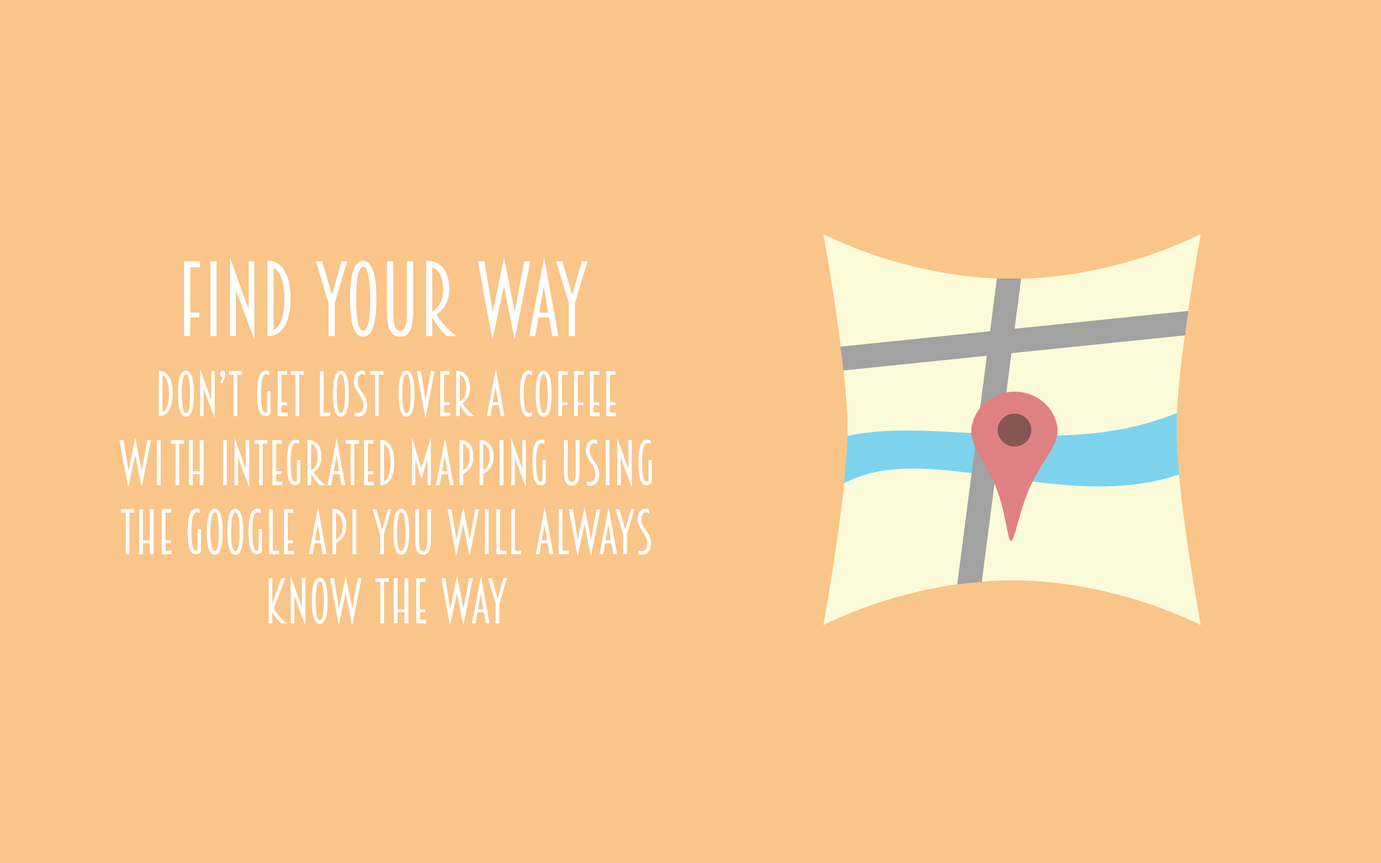
<style>
.page{position:relative;width:1381px;height:863px;background:#f9c588}
.page>*{position:absolute;margin:0}
.t1{font:95.9px "Breamcatcher-Regular";color:#ffffff}
.t2{font:57.6px "Breamcatcher-Regular";color:#ffffff}
</style>
<div class="page">
<p class="t1" style="left:184px;top:258px;width:404px;height:82px">find your way</p>
<p class="t2" style="left:119px;top:369px;width:533px;height:257px;text-align:center">Don’t get lost over a coffee<br>wi th integrated mapping using<br>the google api you will always<br>know the way</p>
</div>
